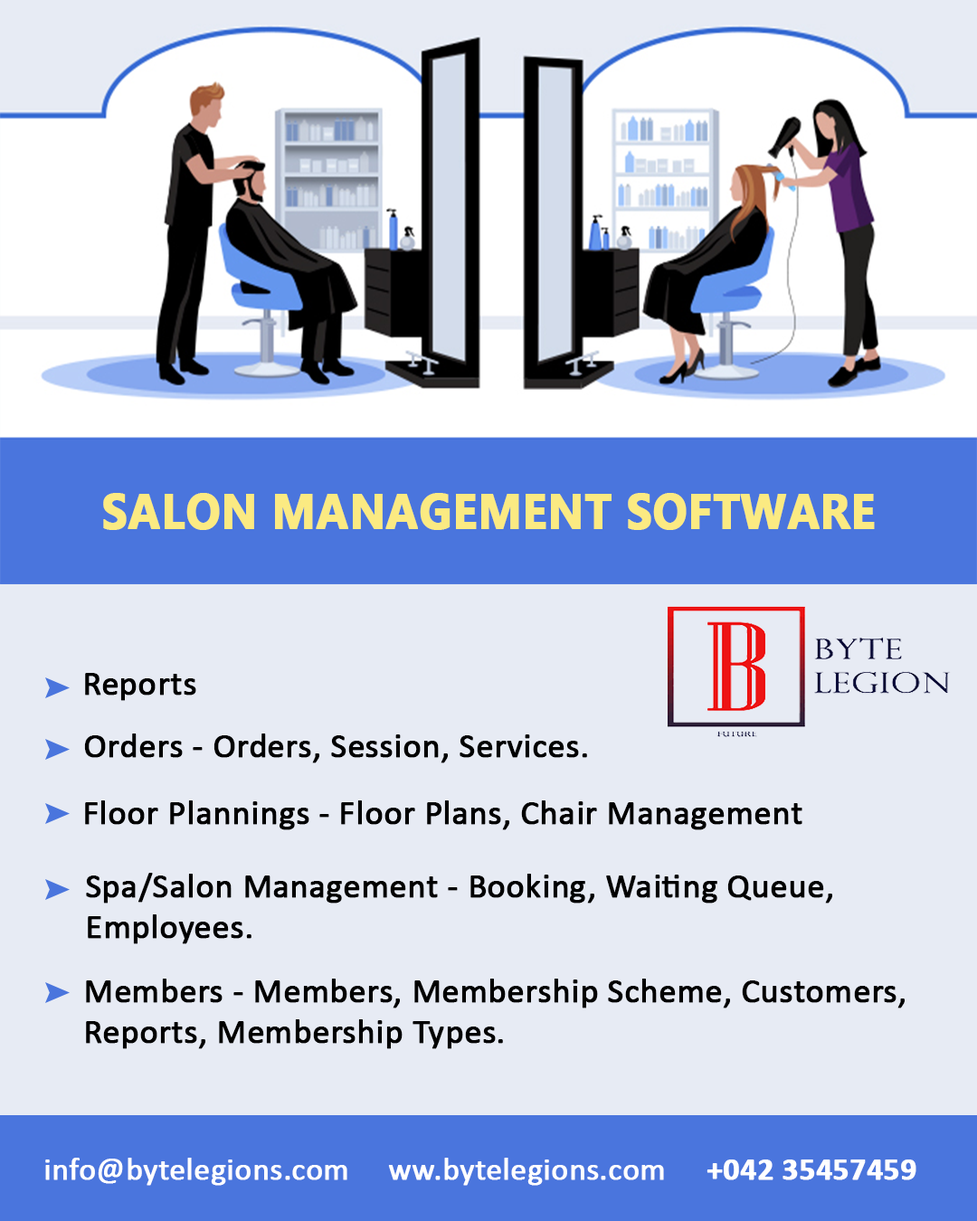
<style>
.page{position:relative;width:977px;height:1221px;background:#e7ebf4}
.page>*{position:absolute;margin:0}
.t1{font:48.6px "MyanmarText-Bold";color:#fbea82;text-transform:uppercase;font-weight:bold;scale:0.93 1}
.t2{font:34.4px "Calibri";color:#000000;font-weight:bold}
.t3{font:34.4px/40.7px "Calibri";color:#000000;font-weight:bold}
.t4{font:31.7px "Calibri";color:#ffffff;font-weight:bold}
.t5{font:31.7px "Calibri-Bold";color:#ffffff;font-weight:bold}
</style>
<div class="page">
<p class="t1" style="left:103px;top:493px;width:772px;height:37px">Salon Management Software</p>
<p class="t2" style="left:85px;top:673px;width:111px;height:28px">Reports</p>
<p class="t2" style="left:84px;top:733px;width:503px;height:30px">Orders - Orders, Session, Services.</p>
<p class="t2" style="left:85px;top:800px;width:717px;height:30px">Floor Plannings - Floor Plans, Chair Management</p>
<p class="t3" style="left:86px;top:873px;width:746px;height:71px">Spa/Salon Management - Booking, Waiting Queue,<br>Employees.</p>
<p class="t3" style="left:86px;top:979px;width:818px;height:70px">Members - Members, Membership Scheme, Customers,<br>Reports, Membership Types.</p>
<p class="t4" style="left:45px;top:1158px;width:302px;height:28px">info@bytelegions.com</p>
<p class="t4" style="left:388px;top:1158px;width:276px;height:28px">ww.bytelegions.com</p>
<p class="t5" style="left:706px;top:1159px;width:210px;height:21px">+042 35457459</p>
</div>
